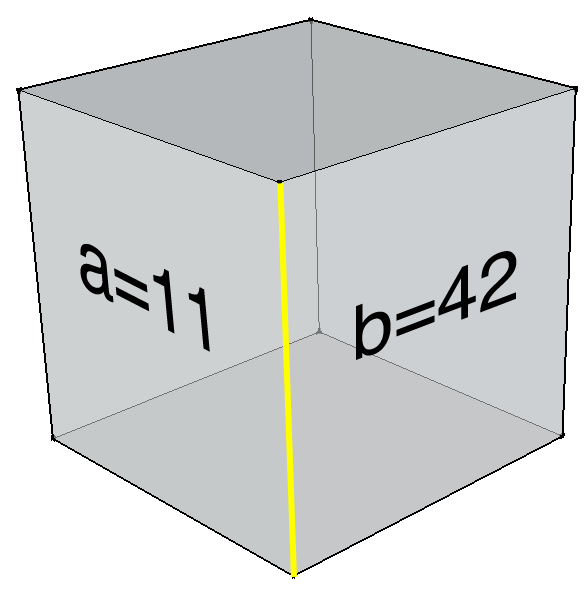
<style>
.page{position:relative;width:587px;height:595px;background:#ffffff}
.page>*{position:absolute;margin:0}
.t1{font:89.3px "Helvetica";color:#000000;scale:0.8 1}
.t2{font:74.3px "Helvetica";color:#000000;scale:1.07 1}
</style>
<div class="page">
<p class="t1" style="left:80px;top:243px;width:130px;height:109px;rotate:27deg">a=11</p>
<p class="t2" style="left:356px;top:251px;width:161px;height:109px;rotate:-21deg">b=42</p>
</div>
